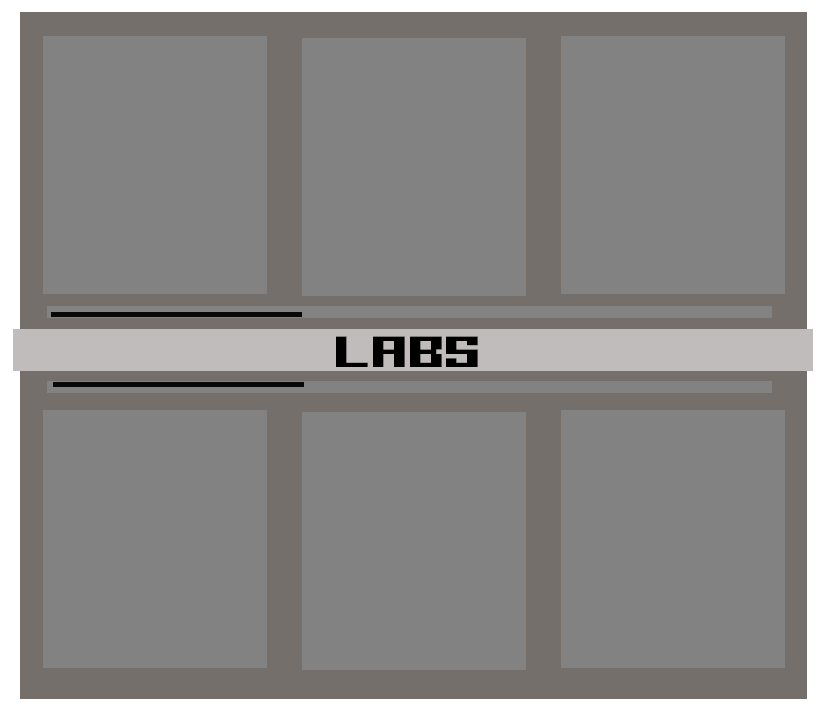
<style>
.page{position:relative;width:825px;height:723px;background:#828282}
.page>*{position:absolute;margin:0}
.t1{font:44.5px "PixelIntv";color:#000000;scale:1.21 1}
</style>
<div class="page">
<p class="t1" style="left:336px;top:336px;width:142px;height:31px">LABS</p>
</div>
